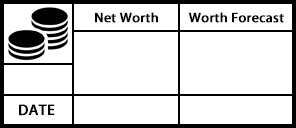
<style>
.page{position:relative;width:296px;height:128px;background:#ffffff}
.page>*{position:absolute;margin:0}
.t1{font:12px "AdobeHeitiStd-Regular";color:#040404;font-weight:bold;scale:1.09 1}
.t2{font:13.3px "AdobeHeitiStd-Regular";color:#040404;font-weight:bold;scale:1.09 1}
</style>
<div class="page">
<p class="t1" style="left:95px;top:12px;width:63px;height:11px">Net Worth</p>
<p class="t1" style="left:188px;top:12px;width:96px;height:11px">Worth Forecast</p>
<p class="t2" style="left:19px;top:104px;width:36px;height:12px">DATE</p>
</div>
